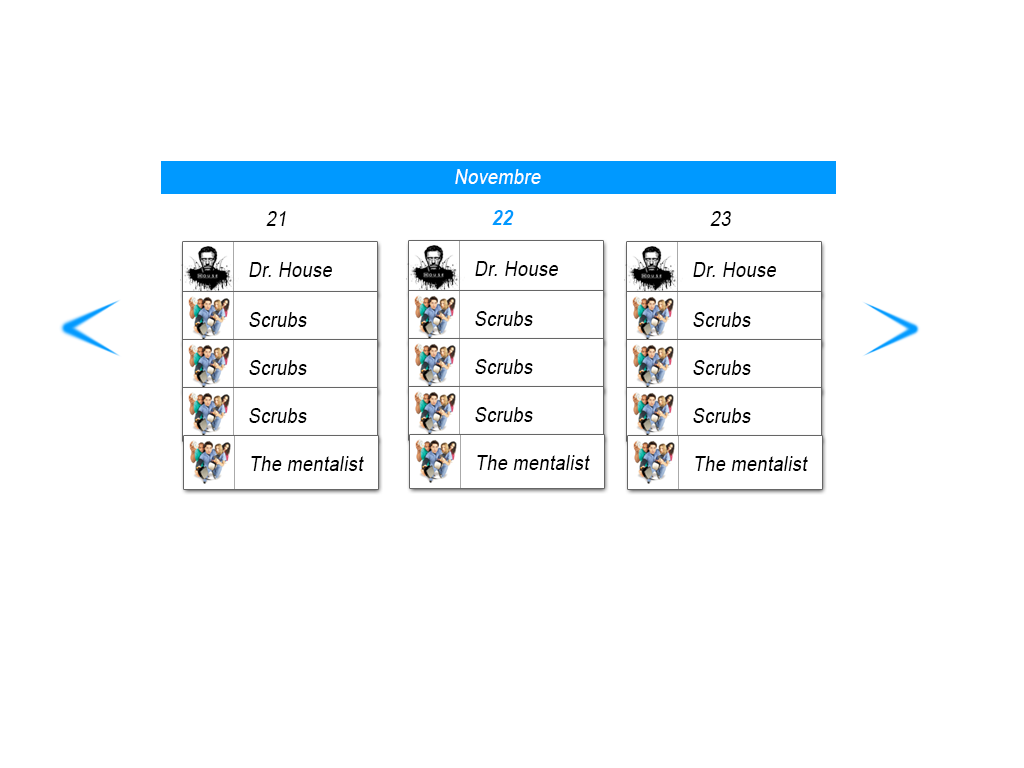
<style>
.page{position:relative;width:1024px;height:768px;background:#ffffff}
.page>*{position:absolute;margin:0}
.t1{font:20.7px "ArialMT";letter-spacing:0.025em;color:#ffffff;font-style:italic;scale:0.87 1}
.t2{font:20.7px "ArialMT";letter-spacing:0.025em;color:#000000;font-style:italic;scale:0.87 1}
.t3{font:20.7px "Arial-BoldMT";letter-spacing:0.025em;color:#0099ff;font-style:italic;scale:0.87 1}
</style>
<div class="page">
<p class="t1" style="left:455px;top:169px;width:86px;height:15px">Novembre</p>
<p class="t2" style="left:266px;top:211px;width:20px;height:15px">21</p>
<p class="t3" style="left:492px;top:210px;width:22px;height:15px">22</p>
<p class="t2" style="left:710px;top:211px;width:21px;height:15px">23</p>
<p class="t2" style="left:249px;top:262px;width:83px;height:15px">Dr. House</p>
<p class="t2" style="left:475px;top:261px;width:83px;height:15px">Dr. House</p>
<p class="t2" style="left:693px;top:262px;width:83px;height:15px">Dr. House</p>
<p class="t2" style="left:249px;top:312px;width:58px;height:15px">Scrubs</p>
<p class="t2" style="left:475px;top:311px;width:58px;height:15px">Scrubs</p>
<p class="t2" style="left:693px;top:312px;width:58px;height:15px">Scrubs</p>
<p class="t2" style="left:249px;top:360px;width:58px;height:15px">Scrubs</p>
<p class="t2" style="left:475px;top:359px;width:58px;height:15px">Scrubs</p>
<p class="t2" style="left:693px;top:360px;width:58px;height:15px">Scrubs</p>
<p class="t2" style="left:249px;top:408px;width:58px;height:15px">Scrubs</p>
<p class="t2" style="left:475px;top:407px;width:58px;height:15px">Scrubs</p>
<p class="t2" style="left:693px;top:408px;width:58px;height:15px">Scrubs</p>
<p class="t2" style="left:251px;top:456px;width:113px;height:15px">The mentalist</p>
<p class="t2" style="left:477px;top:455px;width:113px;height:15px">The mentalist</p>
<p class="t2" style="left:695px;top:456px;width:113px;height:15px">The mentalist</p>
</div>
